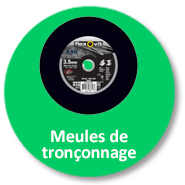
<style>
.page{position:relative;width:185px;height:185px;background:#00cc66}
.page>*{position:absolute;margin:0}
.t1{font:18px/16px "Calibri-Bold";color:#ffffff}
</style>
<div class="page">
<p class="t1" style="left:42px;top:129px;width:94px;height:33px;text-align:center">Meules de  <br>tronçonnage</p>
</div>
